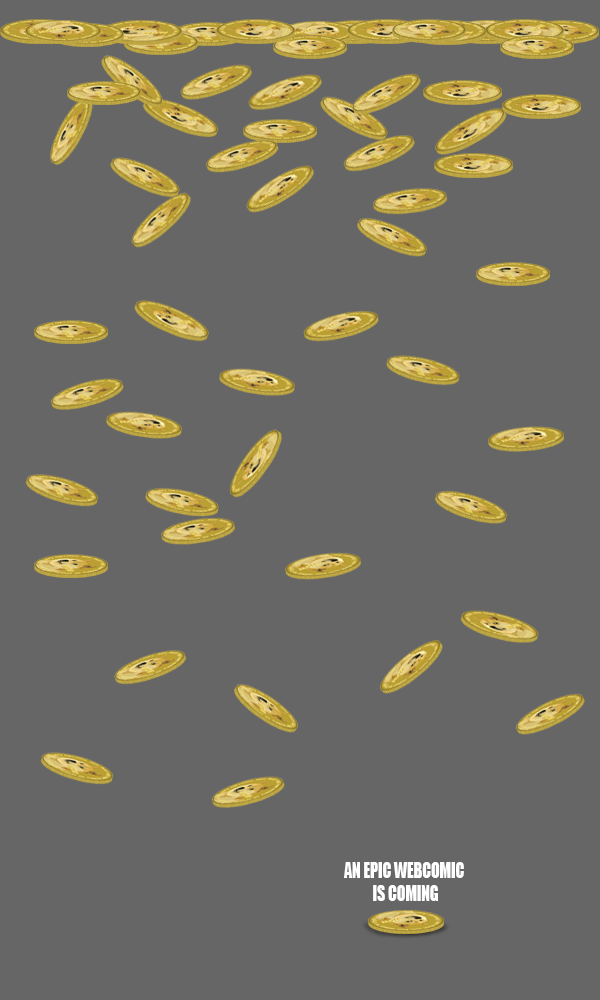
<style>
.page{position:relative;width:600px;height:1000px;background:#666666}
.page>*{position:absolute;margin:0}
.t1{font:19.8px "Impact";color:#ffffff;scale:0.8 1}
</style>
<div class="page">
<p class="t1" style="left:344px;top:862px;width:120px;height:39px;text-align:center">AN EPIC WEBCOMIC <br>IS COMING</p>
</div>
